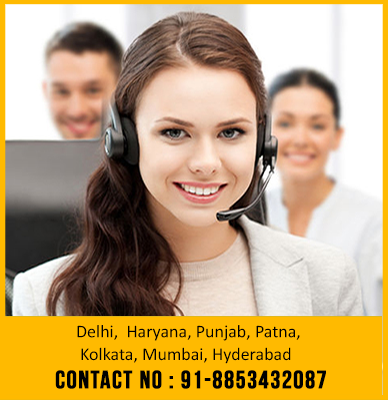
<style>
.page{position:relative;width:388px;height:400px;background:#ffba00}
.page>*{position:absolute;margin:0}
.t1{font:18px/22.9px "Calibri";color:#000000}
.t2{font:24.9px "BebasNeue";letter-spacing:0.04em;color:#000000;font-weight:bold}
</style>
<div class="page">
<p class="t1" style="left:77px;top:325px;width:223px;height:39px">Delhi,  Haryana, Punjab, Patna, <br> Kolkata, Mumbai, Hyderabad</p>
<p class="t2" style="left:55px;top:370px;width:271px;height:19px">Contact no : 91-8853432087</p>
</div>
